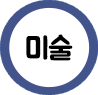
<style>
.page{position:relative;width:98px;height:95px;background:#ffffff}
.page>*{position:absolute;margin:0}
.t1{font:30px "BMJUA";color:#000000}
</style>
<div class="page">
<p class="t1" style="left:26px;top:34px;width:47px;height:27px">미술</p>
</div>
